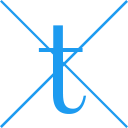
<style>
.page{position:relative;width:128px;height:128px;background:#ffffff}
.page>*{position:absolute;margin:0}
.t1{font:144px "MillerDisplay-Light";letter-spacing:0.2em;color:#1d9bf0}
</style>
<div class="page">
<p class="t1" style="left:38px;top:25px;width:49px;height:89px">t</p>
</div>
